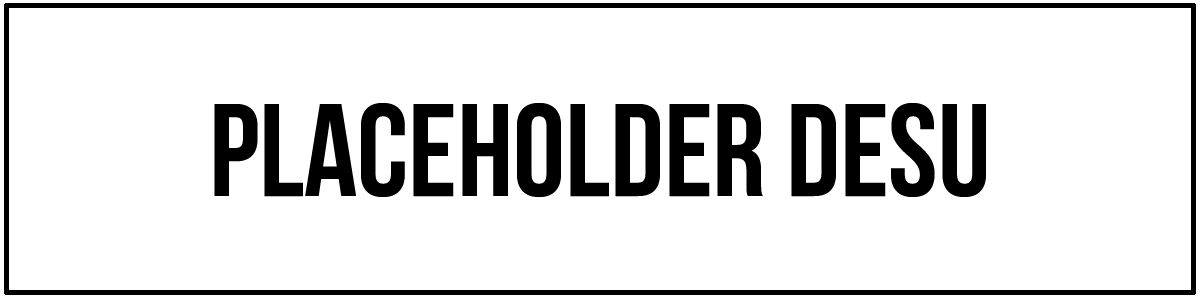
<style>
.page{position:relative;width:1200px;height:300px;background:#ffffff}
.page>*{position:absolute;margin:0}
.t1{font:132px "BebasNeue";color:#000000}
</style>
<div class="page">
<p class="t1" style="left:214px;top:103px;width:772px;height:95px">PLACEHOLDER DESU</p>
</div>
